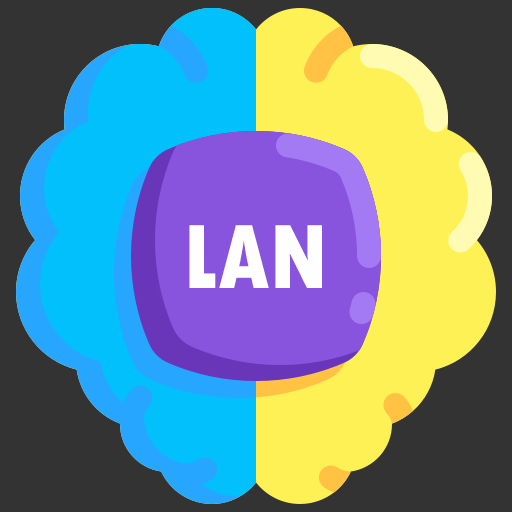
<style>
.page{position:relative;width:512px;height:512px;background:#333333}
.page>*{position:absolute;margin:0}
.t1{font:96px "TwCenMT-CondensedExtraBold";color:#fefefe}
</style>
<div class="page">
<p class="t1" style="left:189px;top:225px;width:133px;height:63px">LAN</p>
</div>
